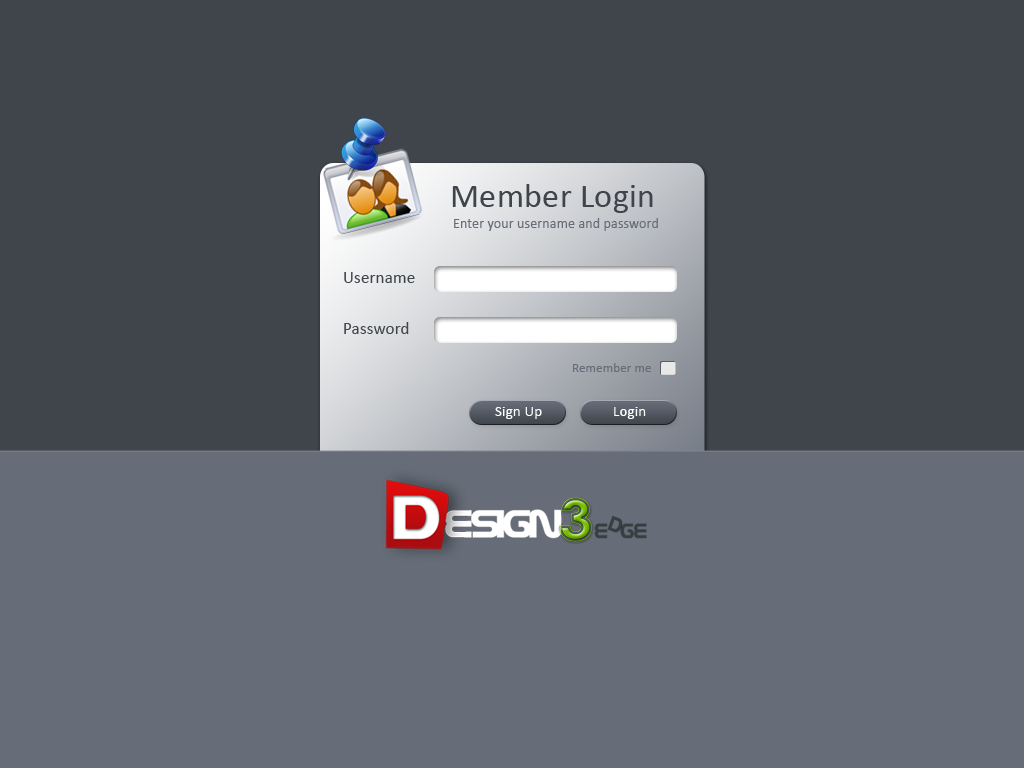
<style>
.page{position:relative;width:1024px;height:768px;background:#40454c}
.page>*{position:absolute;margin:0}
.t1{font:34px "Calibri";letter-spacing:0.01em;color:#40454c}
.t2{font:14px "Calibri";letter-spacing:0.01em;color:#666d78}
.t3{font:17px "Calibri";letter-spacing:0.01em;color:#40454c}
.t4{font:13px "Calibri";letter-spacing:0.01em;color:#666d78}
.t5{font:15px "Calibri";letter-spacing:0.01em;color:#ffffff}
</style>
<div class="page">
<p class="t1" style="left:452px;top:184px;width:201px;height:29px">Member Login</p>
<p class="t2" style="left:454px;top:218px;width:204px;height:13px">Enter your username and password</p>
<p class="t3" style="left:344px;top:272px;width:71px;height:11px">Username</p>
<p class="t3" style="left:344px;top:322px;width:65px;height:12px">Password</p>
<p class="t4" style="left:573px;top:363px;width:78px;height:9px">Remember me</p>
<p class="t5" style="left:495px;top:407px;width:47px;height:12px">Sign Up</p>
<p class="t5" style="left:614px;top:407px;width:32px;height:12px">Login</p>
</div>
